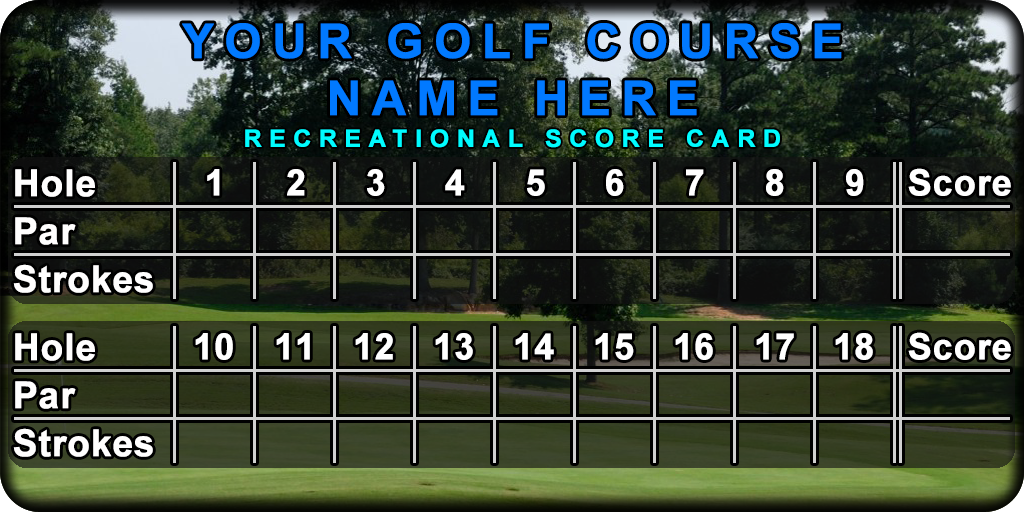
<style>
.page{position:relative;width:1024px;height:512px}
.page>*{position:absolute;margin:0}
.t1{font:47.7px "Arial-BoldMT";letter-spacing:0.2em;color:#0179ff;font-weight:bold}
.t2{font:24px "Arial-BoldMT";letter-spacing:0.3em;color:#00fcff;text-transform:uppercase;font-weight:bold}
.t3{font:37px/48px "Arial-BoldMT";color:#fffefe;font-weight:bold}
.t4{font:36px "Arial-BoldMT";color:#ffffff;font-weight:bold}
</style>
<div class="page">
<p class="t1" style="left:182px;top:23px;width:660px;height:93px;text-align:center">YOUR GOLF COURSE<br>NAME HERE</p>
<p class="t2" style="left:245px;top:129px;width:535px;height:19px">Recreational Score Card</p>
<p class="t3" style="left:13px;top:169px;width:140px;height:124px">Hole<br>Par<br>Strokes</p>
<p class="t4" style="left:207px;top:169px;width:13px;height:27px">1</p>
<p class="t4" style="left:287px;top:169px;width:18px;height:27px">2</p>
<p class="t4" style="left:367px;top:169px;width:18px;height:27px">3</p>
<p class="t4" style="left:445px;top:169px;width:20px;height:27px">4</p>
<p class="t4" style="left:527px;top:169px;width:18px;height:27px">5</p>
<p class="t4" style="left:606px;top:169px;width:18px;height:27px">6</p>
<p class="t4" style="left:686px;top:169px;width:18px;height:27px">7</p>
<p class="t4" style="left:766px;top:169px;width:18px;height:27px">8</p>
<p class="t4" style="left:846px;top:169px;width:18px;height:27px">9</p>
<p class="t4" style="left:908px;top:168px;width:103px;height:28px">Score</p>
<p class="t3" style="left:13px;top:333px;width:140px;height:124px">Hole<br>Par<br>Strokes</p>
<p class="t4" style="left:195px;top:333px;width:38px;height:27px">10</p>
<p class="t4" style="left:276px;top:333px;width:34px;height:27px">11</p>
<p class="t4" style="left:355px;top:333px;width:38px;height:27px">12</p>
<p class="t4" style="left:435px;top:333px;width:38px;height:27px">13</p>
<p class="t4" style="left:515px;top:333px;width:39px;height:27px">14</p>
<p class="t4" style="left:595px;top:333px;width:39px;height:27px">15</p>
<p class="t4" style="left:675px;top:333px;width:38px;height:27px">16</p>
<p class="t4" style="left:756px;top:333px;width:38px;height:27px">17</p>
<p class="t4" style="left:835px;top:333px;width:38px;height:27px">18</p>
<p class="t4" style="left:908px;top:332px;width:103px;height:28px">Score</p>
</div>
